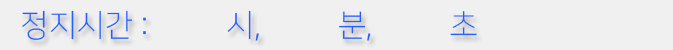
<style>
.page{position:relative;width:673px;height:50px;background:#f0f0f0}
.page>*{position:absolute;margin:0}
.t1{font:31px "NanumSquareL";color:#2462ff}
</style>
<div class="page">
<p class="t1" style="left:22px;top:10px;width:455px;height:31px">정지시간 :          시,          분,          초</p>
</div>
